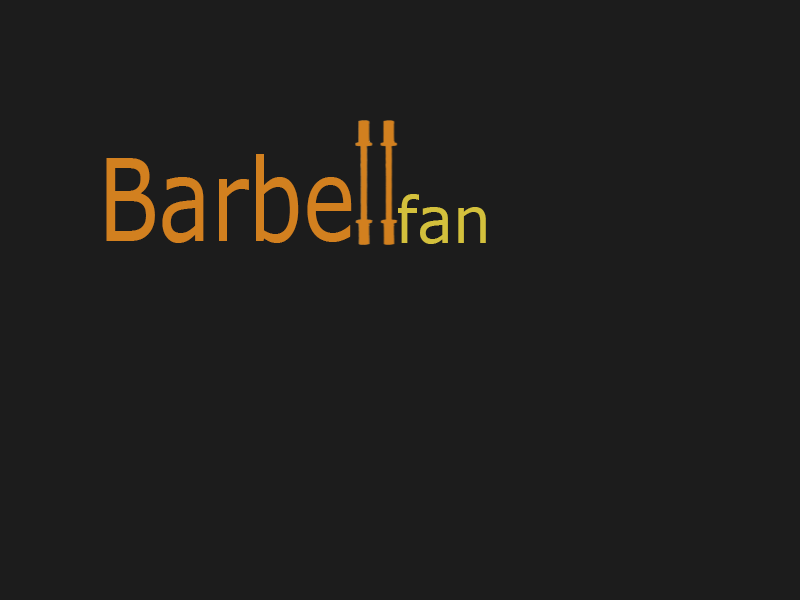
<style>
.page{position:relative;width:800px;height:600px;background:#1c1c1c}
.page>*{position:absolute;margin:0}
.t1{font:114px "Verdana";color:#d2801f;scale:0.77 1}
.t2{font:64.3px "Verdana";color:#d3c03c;scale:0.93 1}
</style>
<div class="page">
<p class="t1" style="left:106px;top:154px;width:246px;height:89px">Barbe</p>
<p class="t2" style="left:398px;top:194px;width:88px;height:50px">fan</p>
</div>
